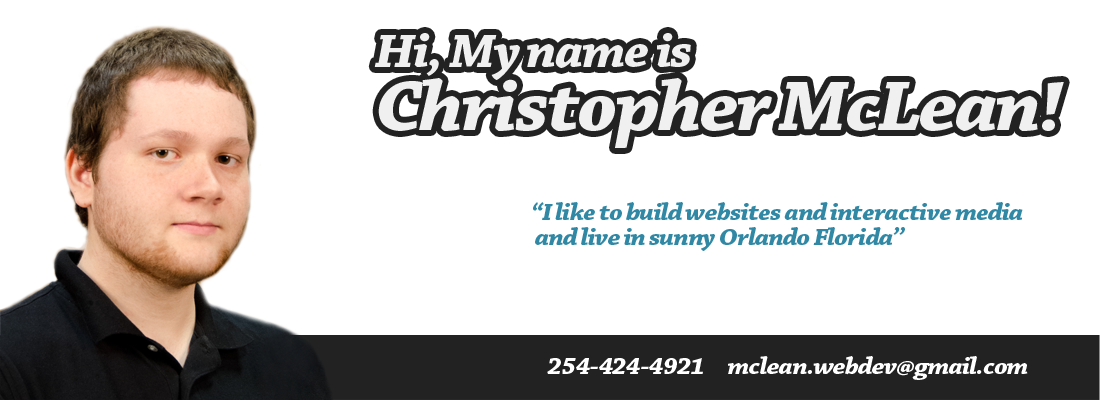
<style>
.page{position:relative;width:1100px;height:400px;background:#ffffff}
.page>*{position:absolute;margin:0}
.t1{font:25px/25px "ChaparralPro-BoldIt";letter-spacing:-0.035em;color:#3088a5;scale:1.08 1}
.t2{font:25px "ChaparralPro-BoldIt";letter-spacing:-0.035em;color:#ffffff;scale:1.08 1}
</style>
<div class="page">
<p class="t1" style="left:533px;top:202px;width:490px;height:49px">“I like to build websites and interactive media<br> and live in sunny Orlando Florida”</p>
<p class="t2" style="left:547px;top:356px;width:481px;height:24px">254-424-4921 mclean.webdev@gmail.com</p>
</div>
